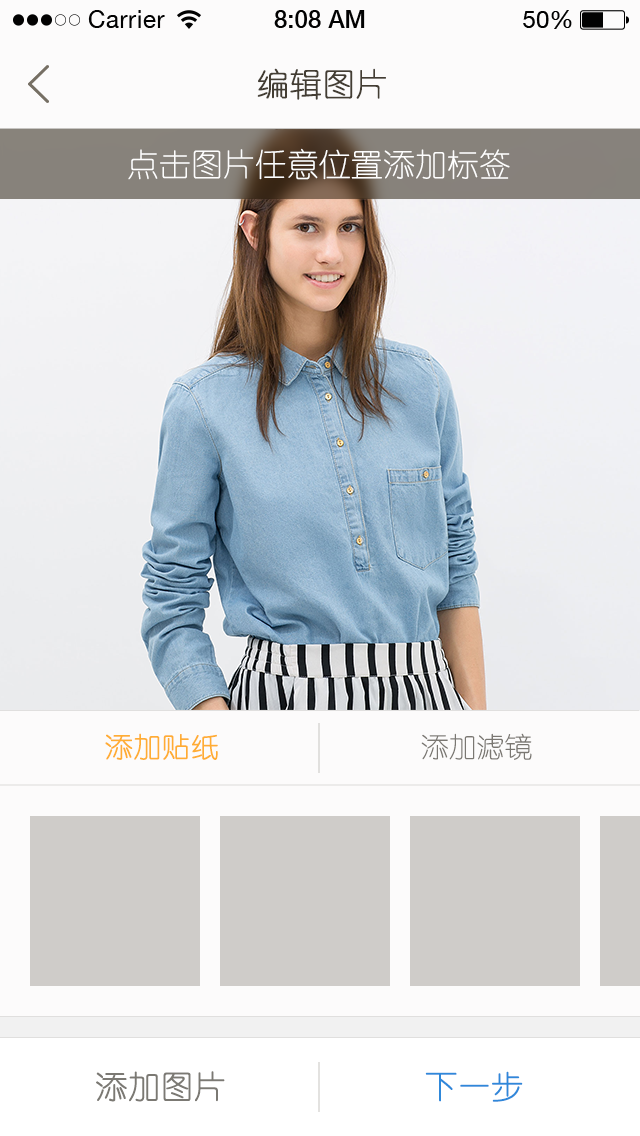
<style>
.page{position:relative;width:640px;height:1136px;background:#fcfbfb}
.page>*{position:absolute;margin:0}
.t1{font:32px "YouYuan";color:#433d33;text-transform:uppercase;font-weight:bold}
.t2{font:32px "YouYuan";color:#fefefe;text-transform:uppercase}
.t3{font:28px "YouYuan";color:#ffad33;text-transform:uppercase;font-weight:bold}
.t4{font:28px "YouYuan";color:#7a7772;text-transform:uppercase}
.t5{font:32px "YouYuan";color:#7b7973;text-transform:uppercase;font-weight:bold}
.t6{font:32px "YouYuan";color:#2f88da;text-transform:uppercase;font-weight:bold}
</style>
<div class="page">
<p class="t1" style="left:257px;top:68px;width:129px;height:32px">编辑图片</p>
<p class="t2" style="left:128px;top:148px;width:382px;height:32px">点击图片任意位置添加标签</p>
<p class="t3" style="left:105px;top:733px;width:113px;height:27px">添加贴纸</p>
<p class="t4" style="left:421px;top:733px;width:111px;height:27px">添加滤镜</p>
<p class="t5" style="left:96px;top:1071px;width:129px;height:31px">添加图片</p>
<p class="t6" style="left:425px;top:1071px;width:98px;height:31px">下一步</p>
</div>
